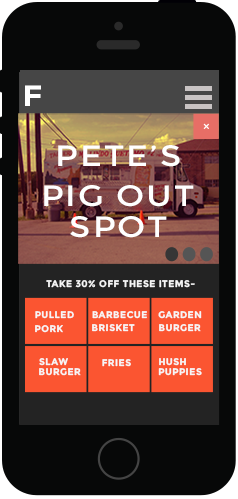
<style>
.page{position:relative;width:238px;height:499px;background:#070808}
.page>*{position:absolute;margin:0}
.t1{font:29.2px "Montserrat-Bold";letter-spacing:0.06em;color:#ffffff;text-transform:uppercase;scale:1.15 1}
.t2{font:29.2px "Montserrat-Regular";letter-spacing:0.06em;color:#ffffff;text-transform:uppercase;scale:1.15 1}
.t3{font:9.6px "Montserrat-Bold";letter-spacing:0.06em;color:#ffffff;text-transform:uppercase;scale:0.96 1}
</style>
<div class="page">
<p class="t1" style="left:25px;top:85px;width:16px;height:21px">f</p>
<p class="t2" style="left:58px;top:145px;width:122px;height:22px">pete’s</p>
<p class="t2" style="left:44px;top:185px;width:150px;height:22px">pig out</p>
<p class="t2" style="left:70px;top:216px;width:97px;height:22px">Spot</p>
<p class="t3" style="left:46px;top:280px;width:149px;height:8px">take 30% off these items-</p>
<p class="t3" style="left:35px;top:311px;width:39px;height:8px">pulled</p>
<p class="t3" style="left:92px;top:311px;width:55px;height:8px">barbecue</p>
<p class="t3" style="left:158px;top:311px;width:44px;height:8px">Garden</p>
<p class="t3" style="left:35px;top:325px;width:28px;height:8px">pork</p>
<p class="t3" style="left:92px;top:324px;width:43px;height:8px">brisket</p>
<p class="t3" style="left:159px;top:324px;width:42px;height:8px">burger</p>
<p class="t3" style="left:39px;top:358px;width:29px;height:8px">Slaw</p>
<p class="t3" style="left:102px;top:359px;width:29px;height:8px">fries</p>
<p class="t3" style="left:159px;top:358px;width:27px;height:8px">hush</p>
<p class="t3" style="left:39px;top:368px;width:42px;height:8px">burger</p>
<p class="t3" style="left:158px;top:368px;width:44px;height:8px">puppies</p>
</div>
